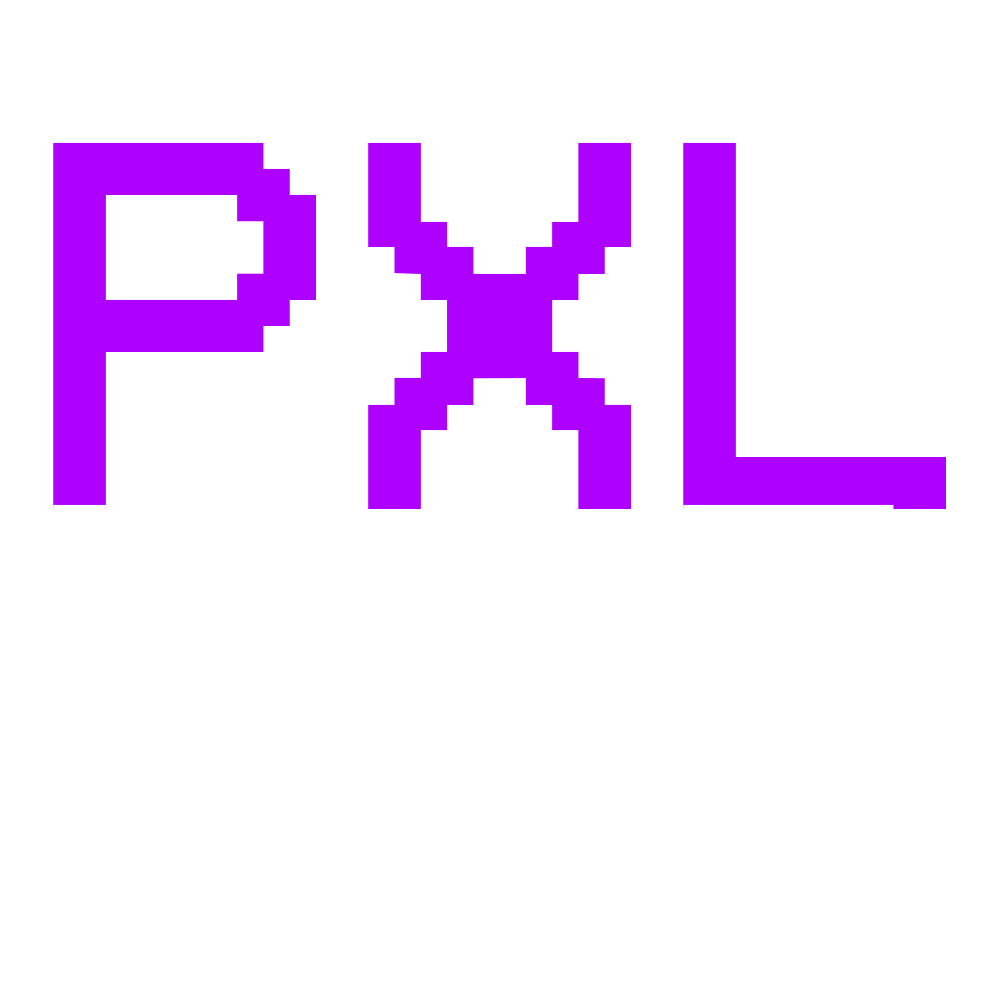
<style>
.page{position:relative;width:1000px;height:1000px;background:#ffffff}
.page>*{position:absolute;margin:0}
.t1{font:534.8px/362px "VCROSDMono";color:#ae00ff}
.t2{font:534.8px/362px "VCROSDMono";color:#ffffff}
</style>
<div class="page">
<p class="t1" style="left:53px;top:142px;width:893px;height:729px">PXL<br><span class="t2">LAB</span></p>
</div>
